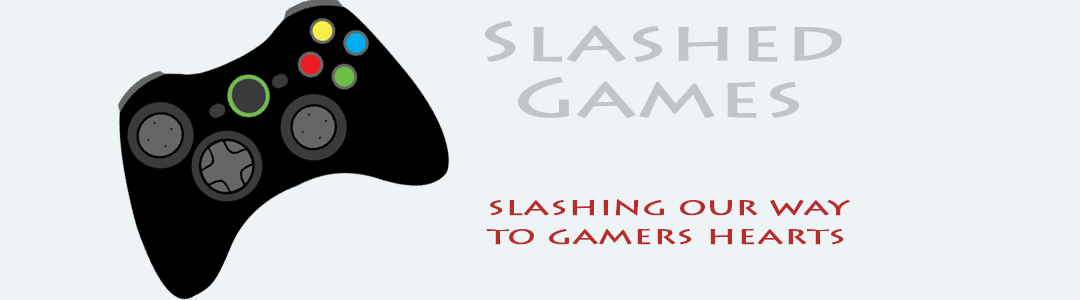
<style>
.page{position:relative;width:1080px;height:300px;background:#eef3f5}
.page>*{position:absolute;margin:0}
.t1{font:55px "LithosPro-Regular";color:#c1c5c7;font-weight:bold;scale:1.5 1}
.t2{font:24px "LithosPro-Regular";color:#b92c2c;font-weight:bold;scale:1.5 1}
</style>
<div class="page">
<p class="t1" style="left:485px;top:21px;width:357px;height:41px">Slashed</p>
<p class="t1" style="left:518px;top:77px;width:281px;height:41px">Games</p>
<p class="t2" style="left:487px;top:199px;width:363px;height:46px;text-align:right">slashing our way <br>to gamers hearts</p>
</div>
